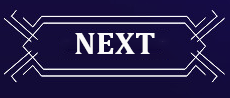
<style>
.page{position:relative;width:230px;height:98px}
.page>*{position:absolute;margin:0}
.t1{font:32.3px "Cambria-Bold";color:#fafafa}
</style>
<div class="page">
<p class="t1" style="left:75px;top:33px;width:80px;height:21px">NEXT</p>
</div>
